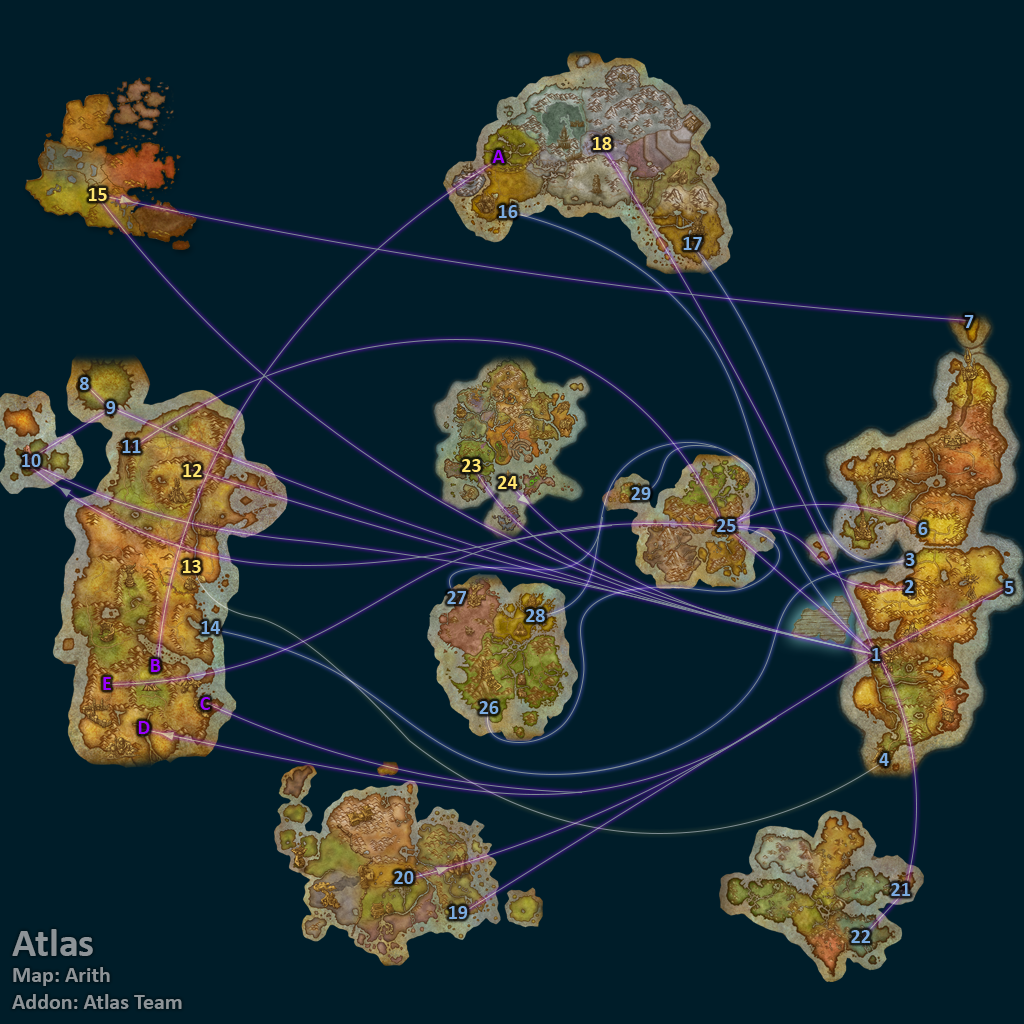
<style>
.page{position:relative;width:1024px;height:1024px;background:#001d29}
.page>*{position:absolute;margin:0}
.t1{font:20px "Calibri-Bold";color:#fee570}
.t2{font:20px "Calibri-Bold";color:#9900ff}
.t3{font:20px "Calibri-Bold";color:#7babe0}
.t4{font:22px "Calibri-Bold";color:#8d9397}
.t5{font:40px "Calibri-Bold";color:#8d9397}
</style>
<div class="page">
<p class="t1" style="left:593px;top:137px;width:19px;height:13px">18</p>
<p class="t2" style="left:492px;top:150px;width:13px;height:13px">A</p>
<p class="t1" style="left:89px;top:188px;width:18px;height:13px">15</p>
<p class="t3" style="left:499px;top:205px;width:19px;height:13px">16</p>
<p class="t3" style="left:683px;top:237px;width:19px;height:13px">17</p>
<p class="t3" style="left:964px;top:315px;width:10px;height:13px">7</p>
<p class="t3" style="left:79px;top:377px;width:10px;height:13px">8</p>
<p class="t3" style="left:106px;top:401px;width:10px;height:13px">9</p>
<p class="t3" style="left:122px;top:440px;width:19px;height:13px">11</p>
<p class="t3" style="left:22px;top:454px;width:19px;height:13px">10</p>
<p class="t1" style="left:462px;top:459px;width:19px;height:13px">23</p>
<p class="t1" style="left:183px;top:464px;width:19px;height:13px">12</p>
<p class="t1" style="left:498px;top:476px;width:20px;height:13px">24</p>
<p class="t3" style="left:631px;top:487px;width:20px;height:13px">29</p>
<p class="t3" style="left:717px;top:519px;width:19px;height:13px">25</p>
<p class="t3" style="left:918px;top:522px;width:10px;height:13px">6</p>
<p class="t3" style="left:906px;top:553px;width:9px;height:13px">3</p>
<p class="t1" style="left:183px;top:560px;width:18px;height:13px">13</p>
<p class="t3" style="left:905px;top:580px;width:9px;height:13px">2</p>
<p class="t3" style="left:1005px;top:581px;width:9px;height:13px">5</p>
<p class="t3" style="left:447px;top:591px;width:19px;height:13px">27</p>
<p class="t3" style="left:526px;top:609px;width:19px;height:13px">28</p>
<p class="t3" style="left:201px;top:621px;width:19px;height:13px">14</p>
<p class="t3" style="left:872px;top:648px;width:9px;height:13px">1</p>
<p class="t2" style="left:151px;top:659px;width:10px;height:13px">B</p>
<p class="t2" style="left:103px;top:677px;width:8px;height:13px">E</p>
<p class="t2" style="left:200px;top:697px;width:10px;height:13px">C</p>
<p class="t3" style="left:479px;top:701px;width:20px;height:13px">26</p>
<p class="t2" style="left:138px;top:721px;width:12px;height:13px">D</p>
<p class="t3" style="left:879px;top:753px;width:10px;height:13px">4</p>
<p class="t3" style="left:394px;top:871px;width:20px;height:13px">20</p>
<p class="t3" style="left:891px;top:883px;width:19px;height:13px">21</p>
<p class="t3" style="left:449px;top:906px;width:19px;height:13px">19</p>
<p class="t4" style="left:12px;top:929px;width:170px;height:80px"><span class="t5">Atlas<br></span>Map: Arith<br>Addon: Atlas Team</p>
<p class="t3" style="left:851px;top:930px;width:20px;height:13px">22</p>
</div>
